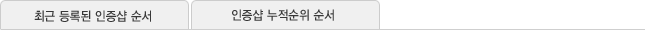
<style>
.page{position:relative;width:645px;height:30px;background:#f0f0f0}
.page>*{position:absolute;margin:0}
.t1{font:12.7px "YDIYGO330";color:#383838;scale:0.91 1}
</style>
<div class="page">
<p class="t1" style="left:34px;top:10px;width:117px;height:12px">최근 등록된 인증샵 순서</p>
<p class="t1" style="left:232px;top:9px;width:102px;height:12px">인증샵 누적순위 순서</p>
</div>
